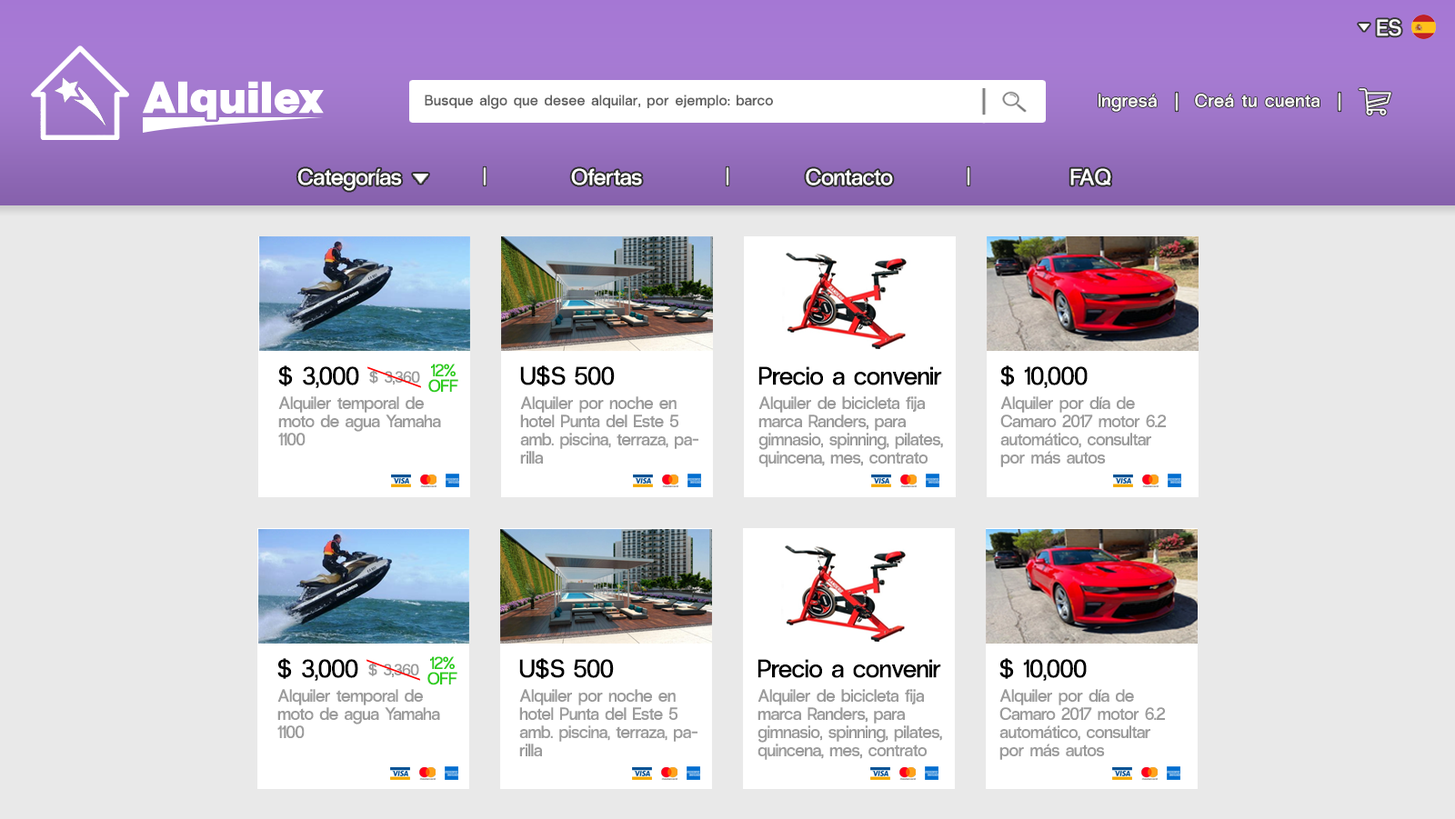
<style>
.page{position:relative;width:1455px;height:819px;background:#e9e9e9}
.page>*{position:absolute;margin:0}
.t1{font:22.7px "RadioGrotesk-Regular";letter-spacing:0.01em;color:#ffffff}
.t2{font:14.6px "RadioGrotesk-Regular";letter-spacing:0.05em;color:#626262}
.t3{font:18.2px "RadioGrotesk-Regular";letter-spacing:0.05em;color:#ffffff}
.t4{font:22.9px "RadioGrotesk-Regular";letter-spacing:0.01em;color:#ffffff}
.t5{font:25.5px "RadioGrotesk-Regular";color:#000000}
.t6{font:17.3px/15.5px "RadioGrotesk-Regular";color:#2dcc1d}
.t7{font:15.8px "RadioGrotesk-Regular";color:#9b9b9b}
.t8{font:17.3px/18.2px "RadioGrotesk-Regular";color:#9b9b9b}
</style>
<div class="page">
<p class="t1" style="left:1377px;top:19px;width:25px;height:17px">ES</p>
<p class="t2" style="left:425px;top:95px;width:348px;height:14px">Busque algo que desee alquilar, por ejemplo: barco</p>
<p class="t3" style="left:1099px;top:94px;width:58px;height:18px">Ingresá</p>
<p class="t3" style="left:1195px;top:94px;width:125px;height:13px">Creá tu cuenta</p>
<p class="t1" style="left:297px;top:168px;width:105px;height:23px">Categorías</p>
<p class="t1" style="left:571px;top:168px;width:71px;height:18px">Ofertas</p>
<p class="t4" style="left:806px;top:168px;width:87px;height:18px">Contacto</p>
<p class="t1" style="left:1070px;top:168px;width:41px;height:18px">FAQ</p>
<p class="t5" style="left:278px;top:366px;width:81px;height:22px">$ 3,000</p>
<p class="t6" style="left:428px;top:364px;width:30px;height:29px;text-align:center">12%<br>OFF</p>
<p class="t5" style="left:520px;top:366px;width:95px;height:21px">U$S 500</p>
<p class="t5" style="left:1000px;top:366px;width:88px;height:22px">$ 10,000</p>
<p class="t7" style="left:369px;top:370px;width:51px;height:15px">$ 3,360</p>
<p class="t5" style="left:759px;top:367px;width:183px;height:19px">Precio a convenir</p>
<p class="t8" style="left:278px;top:397px;width:163px;height:49px">Alquiler temporal de<br>moto de agua Yamaha <br>1100</p>
<p class="t8" style="left:520px;top:397px;width:178px;height:67px">Alquiler por noche en<br>hotel Punta del Este 5<br>amb. piscina, terraza, pa-<br>rilla</p>
<p class="t8" style="left:759px;top:397px;width:184px;height:70px">Alquiler de bicicleta fija<br>marca Randers, para<br>gimnasio, spinning, pilates,<br>quincena, mes, contrato</p>
<p class="t8" style="left:1000px;top:397px;width:166px;height:70px">Alquiler por día de<br>Camaro 2017 motor 6.2<br>automático, consultar<br>por más autos</p>
<p class="t5" style="left:277px;top:658px;width:81px;height:23px">$ 3,000</p>
<p class="t7" style="left:368px;top:663px;width:51px;height:15px">$ 3,360</p>
<p class="t6" style="left:427px;top:657px;width:30px;height:29px;text-align:center">12%<br>OFF</p>
<p class="t5" style="left:519px;top:658px;width:95px;height:21px">U$S 500</p>
<p class="t5" style="left:758px;top:659px;width:183px;height:19px">Precio a convenir</p>
<p class="t5" style="left:1000px;top:658px;width:87px;height:23px">$ 10,000</p>
<p class="t8" style="left:277px;top:689px;width:163px;height:50px">Alquiler temporal de<br>moto de agua Yamaha <br>1100</p>
<p class="t8" style="left:519px;top:689px;width:179px;height:68px">Alquiler por noche en<br>hotel Punta del Este 5<br>amb. piscina, terraza, pa-<br>rilla</p>
<p class="t8" style="left:758px;top:689px;width:184px;height:71px">Alquiler de bicicleta fija<br>marca Randers, para<br>gimnasio, spinning, pilates,<br>quincena, mes, contrato</p>
<p class="t8" style="left:1000px;top:689px;width:165px;height:71px">Alquiler por día de<br>Camaro 2017 motor 6.2<br>automático, consultar<br>por más autos</p>
</div>
